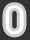
<style>
.page{position:relative;width:30px;height:40px;background:#333333}
.page>*{position:absolute;margin:0}
.t1{font:50px "Bauhaus93";letter-spacing:0.2em}
</style>
<div class="page">
<p class="t1" style="left:2px;top:2px;width:25px;height:36px">0</p>
</div>
